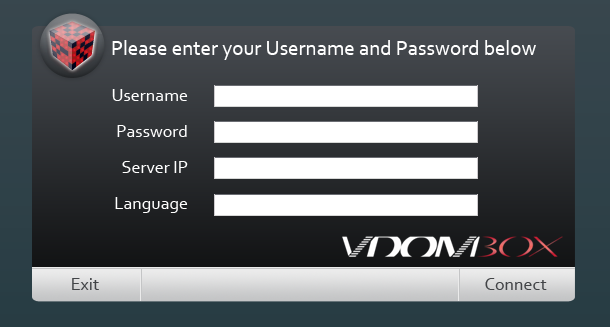
<style>
.page{position:relative;width:610px;height:327px}
.page>*{position:absolute;margin:0}
.t1{font:21px "Corbel";color:#ffffff}
.t2{font:18px/36px "Corbel";color:#ffffff}
.t3{font:18px "Corbel";color:#424447}
</style>
<div class="page">
<p class="t1" style="left:112px;top:40px;width:424px;height:20px">Please enter your Username and Password below</p>
<p class="t2" style="left:112px;top:89px;width:76px;height:124px;text-align:right">Username<br>Password<br>Server IP<br>Language</p>
<p class="t3" style="left:72px;top:278px;width:27px;height:12px">Exit</p>
<p class="t3" style="left:485px;top:278px;width:62px;height:12px">Connect</p>
</div>
